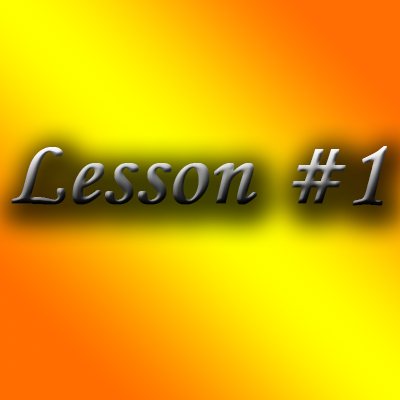
<style>
.page{position:relative;width:400px;height:400px}
.page>*{position:absolute;margin:0}
.t1{font:95px "MonotypeCorsiva";font-weight:bold}
</style>
<div class="page">
<p class="t1" style="left:11px;top:146px;width:376px;height:60px">Lesson #1</p>
</div>
